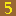
<style>
.page{position:relative;width:16px;height:16px;background:#996633}
.page>*{position:absolute;margin:0}
.t1{font:18px "Sylfaen";color:#f5e814}
</style>
<div class="page">
<p class="t1" style="left:5px;top:2px;width:7px;height:12px">5</p>
</div>
